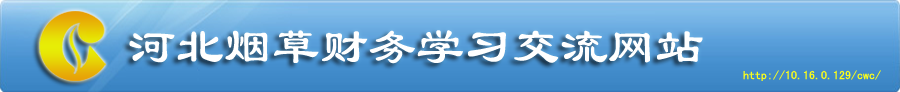
<style>
.page{position:relative;width:900px;height:92px}
.page>*{position:absolute;margin:0}
.t1{font:51.3px "LiSu";color:#ffffff;scale:0.93 1}
.t2{font:12px "SimHei";color:#fafd1b}
</style>
<div class="page">
<p class="t1" style="left:129px;top:30px;width:574px;height:34px">河北烟草财务学习交流网站</p>
<p class="t2" style="left:743px;top:70px;width:138px;height:11px">http://10.16.0.129/cwc/</p>
</div>
